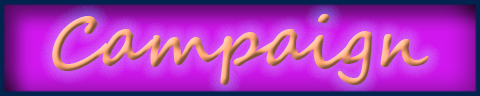
<style>
.page{position:relative;width:480px;height:96px}
.page>*{position:absolute;margin:0}
.t1{font:70.9px "SegoeScript-Bold"}
</style>
<div class="page">
<p class="t1" style="left:52px;top:14px;width:377px;height:71px">Campaign</p>
</div>
